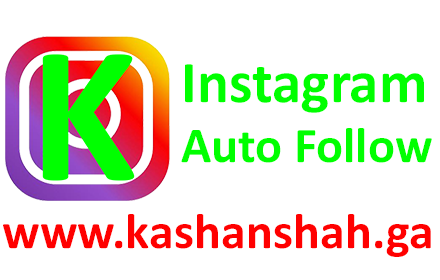
<style>
.page{position:relative;width:440px;height:280px;background:#ffffff}
.page>*{position:absolute;margin:0}
.t1{font:50.1px "Calibri-Bold";color:#00ff00}
.t2{font:59.4px "Calibri-Bold";color:#00ff00}
.t3{font:50.1px "Calibri-Bold";color:#ff0000}
</style>
<div class="page">
<p class="t1" style="left:181px;top:64px;width:251px;height:99px"><span class="t2">Instagram</span> <br>Auto Follow</p>
<p class="t3" style="left:3px;top:214px;width:428px;height:43px">www.kashanshah.ga</p>
</div>
